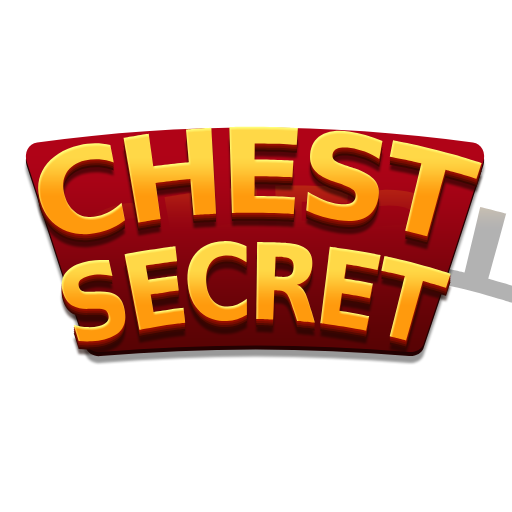
<style>
.page{position:relative;width:512px;height:512px;background:#ffffff}
.page>*{position:absolute;margin:0}
.t1{font:118px "AsketCondensed-ExtraBold";letter-spacing:-0.05em;text-transform:uppercase}
.t2{font:105.6px "AsketCondensed-ExtraBold";letter-spacing:-0.05em;text-transform:uppercase;scale:0.83 1}
</style>
<div class="page">
<p class="t1" style="left:38px;top:126px;width:444px;height:111px">chest</p>
<p class="t2" style="left:61px;top:240px;width:390px;height:102px">secret</p>
</div>
